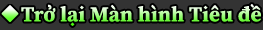
<style>
.page{position:relative;width:263px;height:30px;background:#333333}
.page>*{position:absolute;margin:0}
.t1{font:21px "SourceSerifRoman-Bold";letter-spacing:0.011em}
</style>
<div class="page">
<p class="t1" style="left:21px;top:4px;width:240px;height:22px">Trở lại Màn hình Tiêu đề</p>
</div>
